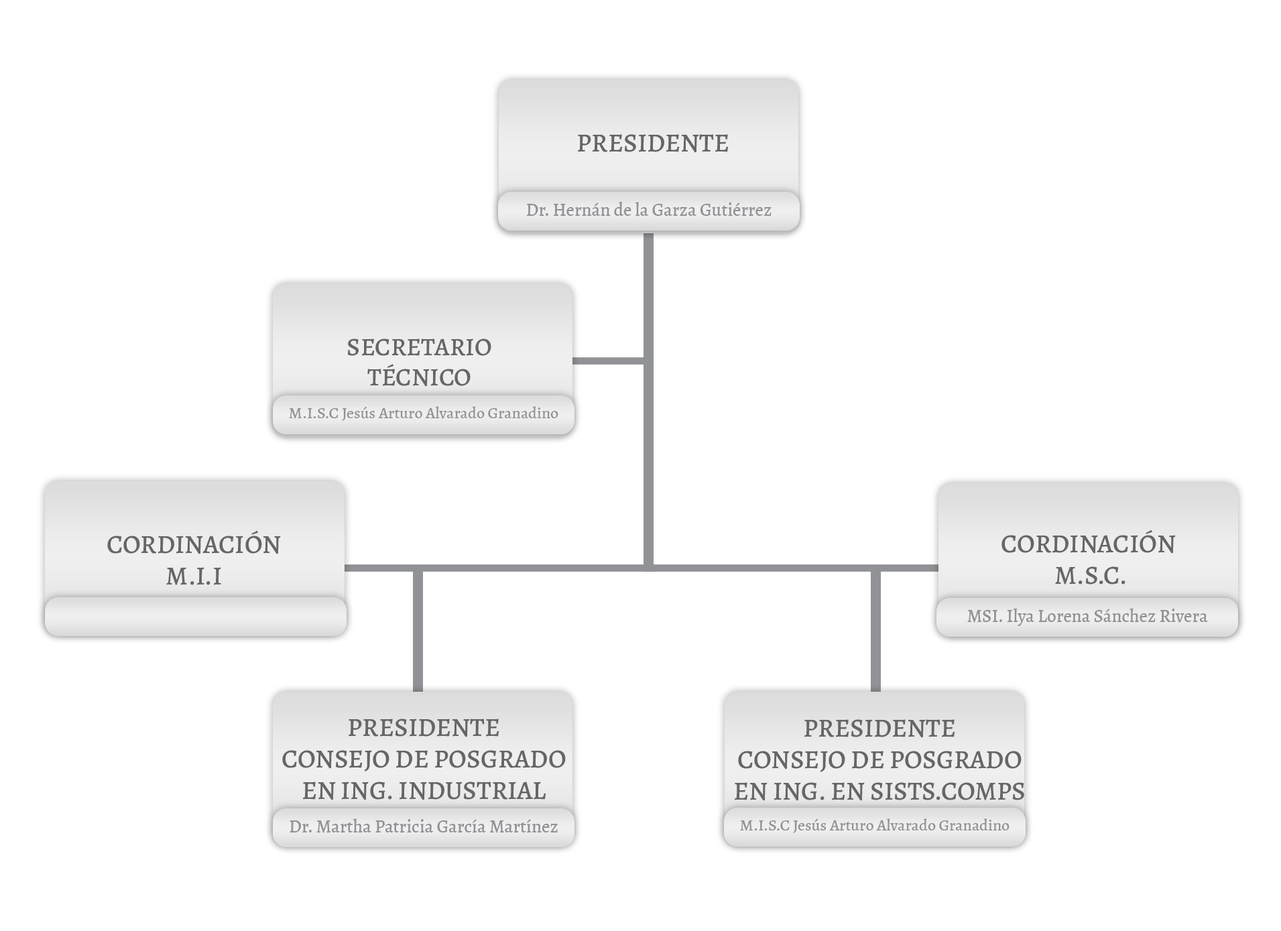
<style>
.page{position:relative;width:1281px;height:931px;background:#ffffff}
.page>*{position:absolute;margin:0}
.t1{font:26.2px "Alegreya-Medium";color:#666666}
.t2{font:18.2px "Alegreya-Medium";color:#909295}
.t3{font:25.2px "Alegreya-Medium";color:#666666}
.t4{font:16.1px "Alegreya-Medium";color:#909295}
</style>
<div class="page">
<p class="t1" style="left:578px;top:134px;width:151px;height:19px">PRESIDENTE</p>
<p class="t2" style="left:526px;top:202px;width:245px;height:14px">Dr. Hernán de la Garza Gutiérrez</p>
<p class="t3" style="left:347px;top:338px;width:144px;height:49px;text-align:center">SECRETARIO<br>TÉCNICO</p>
<p class="t4" style="left:289px;top:406px;width:269px;height:15px">M.I.S.C Jesús Arturo Alvarado Granadino</p>
<p class="t1" style="left:107px;top:530px;width:174px;height:55px;text-align:center">CORDINACIÓN<br>M.I.I</p>
<p class="t1" style="left:1001px;top:529px;width:175px;height:55px;text-align:center">CORDINACIÓN <br>M.S.C.</p>
<p class="t2" style="left:967px;top:608px;width:241px;height:18px">MSI. Ilya Lorena Sánchez Rivera</p>
<p class="t1" style="left:282px;top:719px;width:284px;height:81px;text-align:center">PRESIDENTE<br>CONSEJO DE POSGRADO<br>EN ING. INDUSTRIAL</p>
<p class="t1" style="left:735px;top:719px;width:289px;height:82px;text-align:center">PRESIDENTE<br>CONSEJO DE POSGRADO<br>EN ING. EN SISTS.COMPS</p>
<p class="t2" style="left:290px;top:818px;width:268px;height:15px">Dr. Martha Patricia García Martínez</p>
<p class="t4" style="left:740px;top:818px;width:269px;height:15px">M.I.S.C Jesús Arturo Alvarado Granadino</p>
</div>
